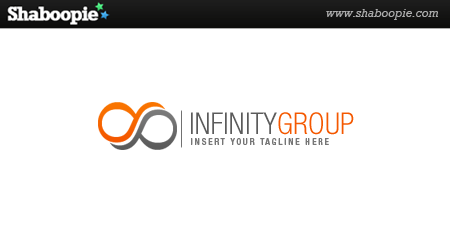
<style>
.page{position:relative;width:450px;height:250px;background:#ffffff}
.page>*{position:absolute;margin:0}
.t1{font:30px "HelveticaNeueLTStd-LtCn";color:#5b5b5b}
.t2{font:30px "HelveticaNeueLTStd-LtCn";color:#f45800}
.t3{font:9px "HelveticaNeueLTStd-MdCn";letter-spacing:0.2em;color:#767676}
</style>
<div class="page">
<p class="t1" style="left:191px;top:112px;width:163px;height:23px">INFINITY<span class="t2">GROUP</span></p>
<p class="t3" style="left:191px;top:138px;width:138px;height:7px">INSERT YOUR TAGLINE HERE</p>
</div>
